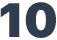
<style>
.page{position:relative;width:57px;height:40px;background:#ffffff}
.page>*{position:absolute;margin:0}
.t1{font:48px "SFProDisplay-Black";color:#2f3e4e}
</style>
<div class="page">
<p class="t1" style="left:0px;top:2px;width:56px;height:36px">10</p>
</div>
